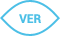
<style>
.page{position:relative;width:60px;height:36px;background:#ffffff}
.page>*{position:absolute;margin:0}
.t1{font:12px "Roboto-Bold";color:#4cbfe6}
</style>
<div class="page">
<p class="t1" style="left:19px;top:14px;width:22px;height:9px">VER</p>
</div>
